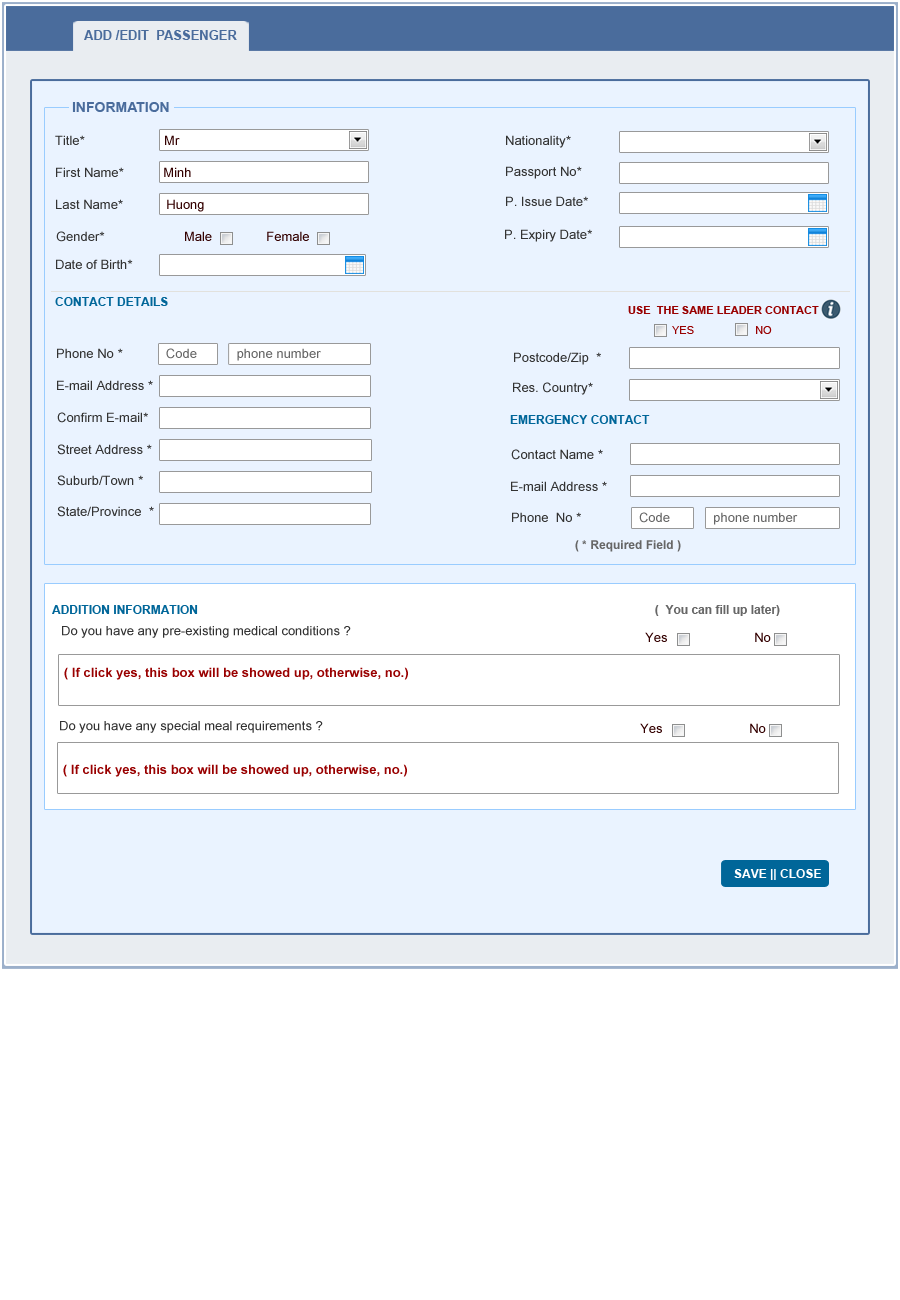
<style>
.page{position:relative;width:900px;height:1300px;background:#ffffff}
.page>*{position:absolute;margin:0}
.t1{font:13px "Arial-BoldMT";color:#4a6c9c}
.t2{font:14px "Arial-BoldMT";color:#4a6c9c}
.t3{font:13px "ArialMT";color:#333333}
.t4{font:13px "ArialMT";color:#330000}
.t5{font:12px "Arial-BoldMT";color:#006699}
.t6{font:11px "Arial-BoldMT";color:#990000}
.t7{font:11px "ArialMT";color:#990000}
.t8{font:13px "ArialMT";color:#666666}
.t9{font:12px "Arial-BoldMT";color:#666666}
.t10{font:13px "Arial-BoldMT";color:#990000}
.t11{font:12px "Arial-BoldMT";color:#ffffff}
</style>
<div class="page">
<p class="t1" style="left:84px;top:30px;width:153px;height:10px">ADD /EDIT  PASSENGER</p>
<p class="t2" style="left:72px;top:102px;width:97px;height:10px">INFORMATION</p>
<p class="t3" style="left:55px;top:135px;width:125px;height:10px">Title*   <span class="t4">                   Mr</span></p>
<p class="t3" style="left:506px;top:135px;width:65px;height:13px">Nationality*</p>
<p class="t3" style="left:56px;top:167px;width:135px;height:10px">First Name* <span class="t4">          Minh</span></p>
<p class="t3" style="left:506px;top:166px;width:76px;height:13px">Passport No*</p>
<p class="t3" style="left:506px;top:196px;width:82px;height:10px">P. Issue Date*</p>
<p class="t3" style="left:56px;top:199px;width:148px;height:13px">Last Name* <span class="t4">           Huong</span></p>
<p class="t4" style="left:56px;top:231px;width:253px;height:11px"><span class="t3">Gender*   </span>                   Male               Female</p>
<p class="t3" style="left:505px;top:229px;width:87px;height:13px">P. Expiry Date*</p>
<p class="t3" style="left:56px;top:259px;width:77px;height:10px">Date of Birth*</p>
<p class="t5" style="left:55px;top:297px;width:113px;height:9px">CONTACT DETAILS</p>
<p class="t6" style="left:628px;top:306px;width:191px;height:8px"><span class="t7"> </span>USE  THE SAME LEADER CONTACT</p>
<p class="t7" style="left:672px;top:326px;width:100px;height:8px">YES                    NO</p>
<p class="t8" style="left:57px;top:348px;width:264px;height:13px"><span class="t3">Phone No *           </span> Code           phone number</p>
<p class="t3" style="left:514px;top:352px;width:87px;height:13px">Postcode/Zip  *</p>
<p class="t3" style="left:57px;top:380px;width:96px;height:10px">E-mail Address *</p>
<p class="t3" style="left:513px;top:382px;width:80px;height:13px">Res. Country*</p>
<p class="t3" style="left:57px;top:412px;width:91px;height:11px">Confirm E-mail*</p>
<p class="t5" style="left:510px;top:415px;width:140px;height:9px">EMERGENCY CONTACT</p>
<p class="t3" style="left:57px;top:444px;width:95px;height:11px">Street Address *</p>
<p class="t3" style="left:511px;top:449px;width:92px;height:11px">Contact Name *</p>
<p class="t3" style="left:57px;top:475px;width:86px;height:11px">Suburb/Town *</p>
<p class="t3" style="left:511px;top:481px;width:96px;height:10px">E-mail Address *</p>
<p class="t3" style="left:57px;top:506px;width:97px;height:11px">State/Province  *</p>
<p class="t8" style="left:512px;top:512px;width:286px;height:13px"><span class="t3">Phone  No *                </span>Code            phone number</p>
<p class="t9" style="left:575px;top:540px;width:106px;height:12px">( * Required Field )</p>
<p class="t9" style="left:52px;top:605px;width:728px;height:11px"><span class="t5">ADDITION INFORMATION                                                                                                                                         </span>(  You can fill up later)</p>
<p class="t3" style="left:62px;top:626px;width:289px;height:12px">Do you have any pre-existing medical conditions ?</p>
<p class="t4" style="left:645px;top:632px;width:126px;height:10px">Yes                        No</p>
<p class="t10" style="left:64px;top:667px;width:344px;height:13px">( If click yes, this box will be showed up, otherwise, no.)</p>
<p class="t3" style="left:60px;top:721px;width:263px;height:12px">Do you have any special meal requirements ?</p>
<p class="t4" style="left:640px;top:723px;width:126px;height:10px">Yes                        No</p>
<p class="t10" style="left:63px;top:764px;width:344px;height:13px">( If click yes, this box will be showed up, otherwise, no.)</p>
<p class="t11" style="left:734px;top:869px;width:87px;height:11px">SAVE || CLOSE</p>
</div>
